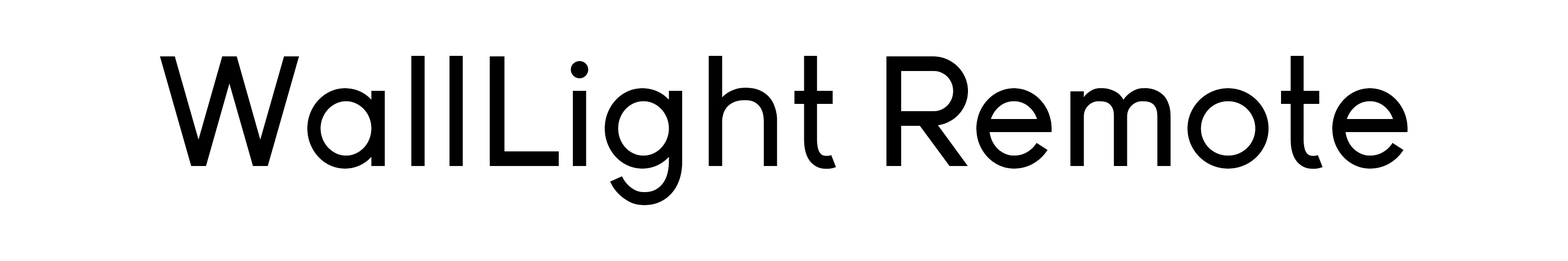
<style>
.page{position:relative;width:1568px;height:261px;background:#ffffff}
.page>*{position:absolute;margin:0}
.t1{font:156.8px "Young";color:#000000}
</style>
<div class="page">
<p class="t1" style="left:160px;top:56px;width:1248px;height:149px">WallLight Remote</p>
</div>
